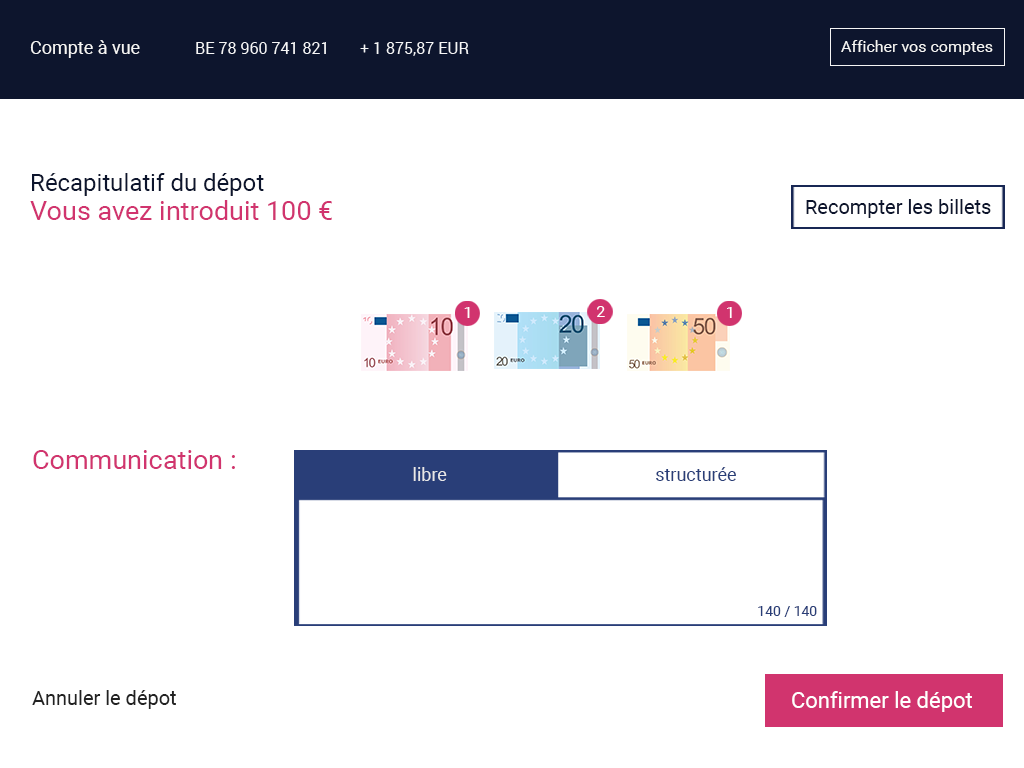
<style>
.page{position:relative;width:1024px;height:768px;background:#ffffff}
.page>*{position:absolute;margin:0}
.t1{font:18px "Roboto-Regular";color:#f5f5f5}
.t2{font:16px "Roboto-Regular";color:#f5f5f5}
.t3{font:24px "Roboto-Regular";color:#0d152d}
.t4{font:27px "Roboto-Regular";color:#d1346e}
.t5{font:20px "Roboto-Regular";color:#0d152d}
.t6{font:16.4px "Roboto-Regular";color:#ffffff}
.t7{font:18px "Roboto-Regular";color:#e8e8e8}
.t8{font:18px "Roboto-Regular";color:#293e78}
.t9{font:14px "Roboto-Regular";color:#293e78}
.t10{font:20px "Roboto-Regular";color:#222222}
.t11{font:22px "Roboto-Regular";color:#ffffff}
</style>
<div class="page">
<p class="t1" style="left:30px;top:40px;width:110px;height:18px">Compte à vue</p>
<p class="t2" style="left:841px;top:40px;width:152px;height:15px">Afficher vos comptes</p>
<p class="t2" style="left:196px;top:42px;width:130px;height:12px">BE 78 960 741 821</p>
<p class="t2" style="left:360px;top:42px;width:109px;height:14px">+ 1 875,87 EUR</p>
<p class="t3" style="left:32px;top:173px;width:232px;height:23px">Récapitulatif du dépot</p>
<p class="t4" style="left:30px;top:200px;width:302px;height:20px">Vous avez introduit 100 €</p>
<p class="t5" style="left:806px;top:199px;width:185px;height:19px">Recompter les billets</p>
<p class="t6" style="left:464px;top:307px;width:6px;height:11px">1</p>
<p class="t6" style="left:597px;top:306px;width:8px;height:11px">2</p>
<p class="t6" style="left:727px;top:307px;width:5px;height:11px">1</p>
<p class="t4" style="left:33px;top:450px;width:202px;height:19px">Communication :</p>
<p class="t7" style="left:413px;top:467px;width:34px;height:14px">libre</p>
<p class="t8" style="left:656px;top:467px;width:80px;height:14px">structurée</p>
<p class="t9" style="left:758px;top:606px;width:59px;height:11px">140 / 140</p>
<p class="t10" style="left:32px;top:690px;width:144px;height:19px">Annuler le dépot</p>
<p class="t11" style="left:792px;top:691px;width:180px;height:21px">Confirmer le dépot</p>
</div>
